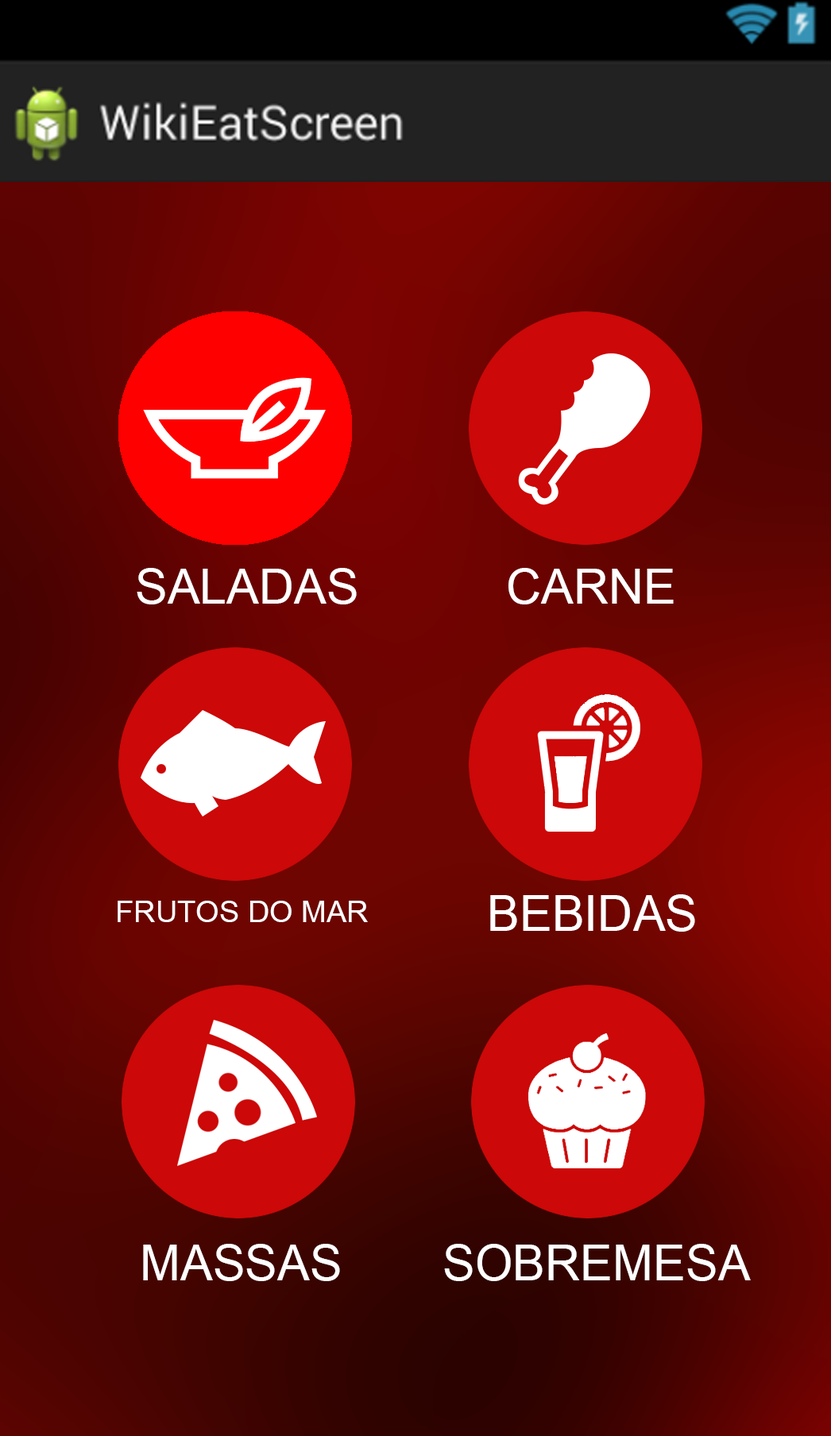
<style>
.page{position:relative;width:831px;height:1436px}
.page>*{position:absolute;margin:0}
.t1{font:48.4px "ArialMT";color:#ffffff}
.t2{font:48.3px "ArialMT";color:#ffffff}
.t3{font:30.2px "ArialMT";color:#ffffff}
.t4{font:48.8px "ArialMT";color:#ffffff}
.t5{font:48.9px "ArialMT";color:#ffffff}
</style>
<div class="page">
<p class="t1" style="left:137px;top:568px;width:220px;height:36px">SALADAS</p>
<p class="t2" style="left:508px;top:568px;width:165px;height:36px">CARNE</p>
<p class="t3" style="left:118px;top:900px;width:250px;height:22px">FRUTOS DO MAR</p>
<p class="t4" style="left:490px;top:894px;width:205px;height:37px">BEBIDAS</p>
<p class="t5" style="left:143px;top:1243px;width:197px;height:38px">MASSAS</p>
<p class="t4" style="left:444px;top:1243px;width:306px;height:38px">SOBREMESA</p>
</div>
